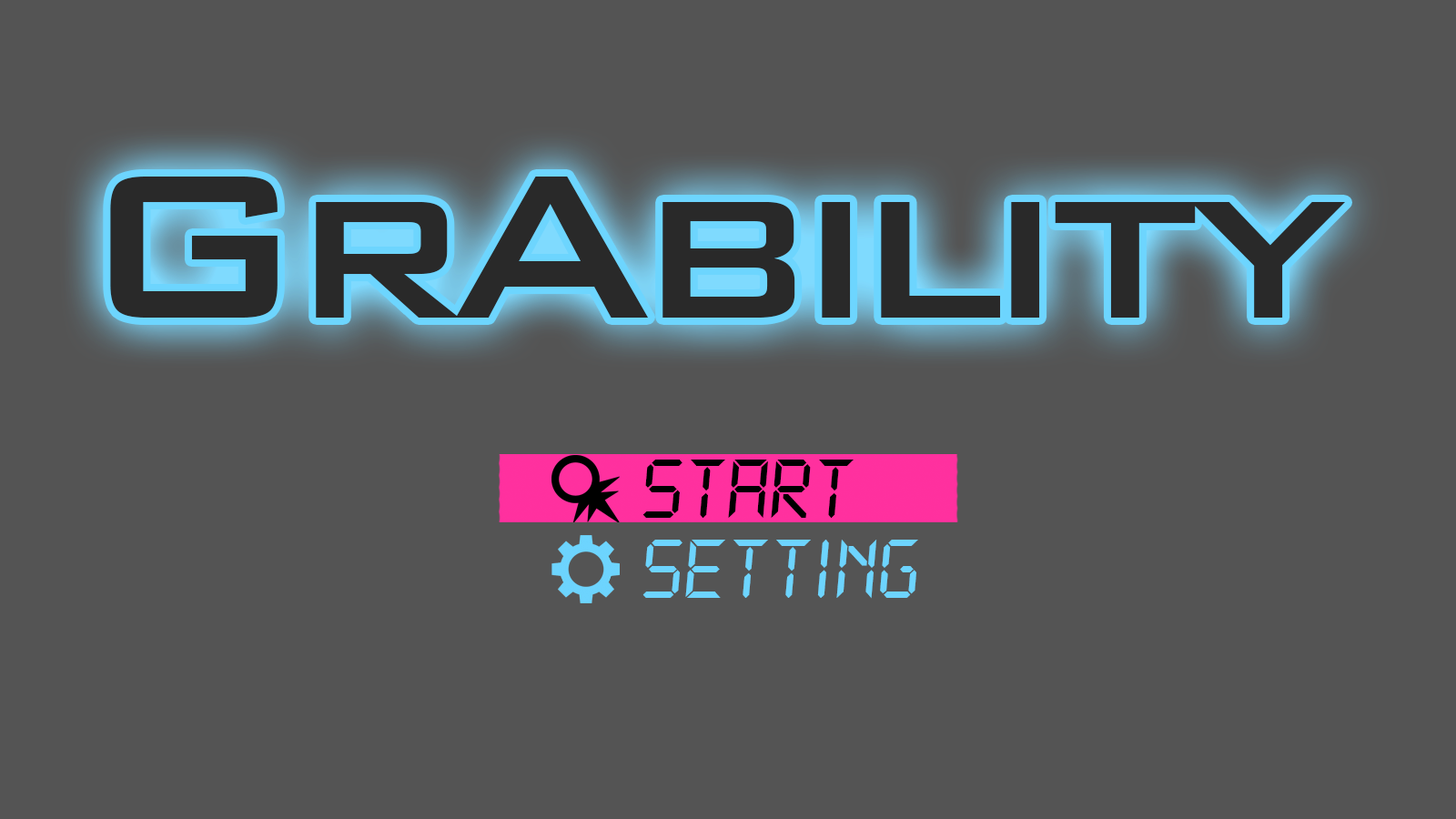
<style>
.page{position:relative;width:1456px;height:819px;background:#545454}
.page>*{position:absolute;margin:0}
.t1{font:273px "BankGothicBT-Medium";letter-spacing:-0.075em;color:#292929}
.t2{font:91px "DS-Digital-Italic";letter-spacing:-0.02em;color:#000000}
.t3{font:91px "DS-Digital-Italic";letter-spacing:-0.02em;color:#63cbff}
</style>
<div class="page">
<p class="t1" style="left:110px;top:177px;width:1236px;height:141px">GrAbility</p>
<p class="t2" style="left:642px;top:460px;width:212px;height:58px">start</p>
<p class="t3" style="left:642px;top:540px;width:276px;height:59px">setting</p>
</div>
